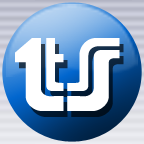
<style>
.page{position:relative;width:144px;height:144px}
.page>*{position:absolute;margin:0}
.t1{font:114.5px "Adriator";letter-spacing:-0.04em;color:#ffffff;scale:1.17 1}
</style>
<div class="page">
<p class="t1" style="left:15px;top:38px;width:105px;height:73px">TS</p>
</div>
